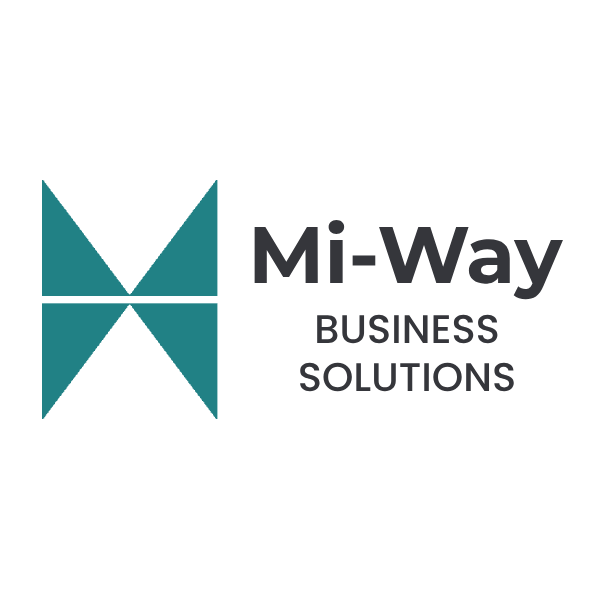
<style>
.page{position:relative;width:600px;height:600px;background:#ffffff}
.page>*{position:absolute;margin:0}
.t1{font:80px "Montserrat-Bold";color:#35363b}
.t2{font:40px "Poppins-Medium";color:#35363b}
</style>
<div class="page">
<p class="t1" style="left:254px;top:220px;width:309px;height:80px">Mi-Way</p>
<p class="t2" style="left:300px;top:314px;width:214px;height:78px;text-align:center">BUSINESS<br>SOLUTIONS</p>
</div>
